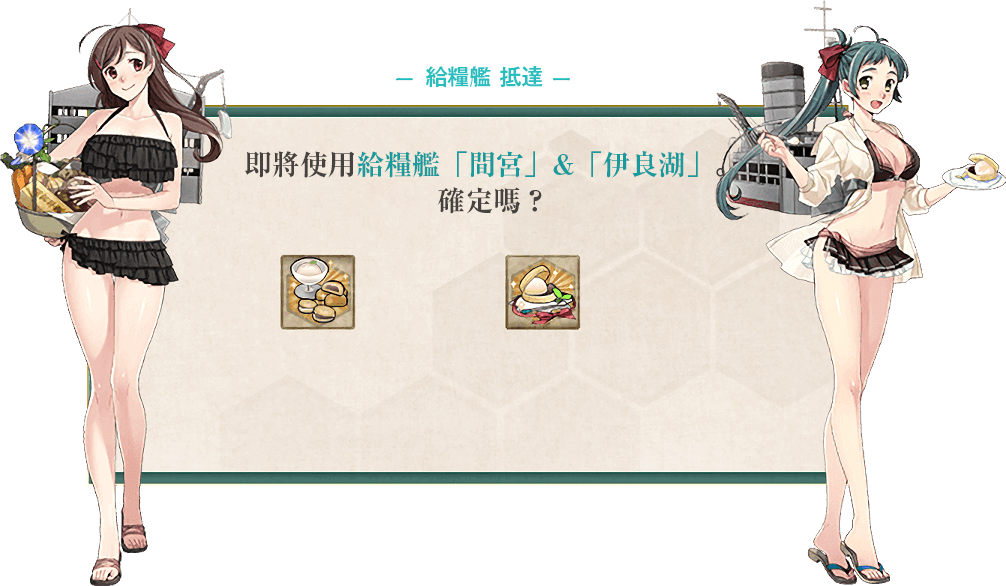
<style>
.page{position:relative;width:1006px;height:586px;background:#ffffff}
.page>*{position:absolute;margin:0}
.t1{font:22px "GothicMB101Pr6N-Medium";color:#2bbcbe}
.t2{font:28px/36px "RyuminPr6N-ExBold";color:#199a9c}
.t3{font:28px/36px "RyuminPr6N-ExBold";color:#46423f}
</style>
<div class="page">
<p class="t1" style="left:426px;top:65px;width:117px;height:23px">給糧艦 抵達</p>
<p class="t2" style="left:245px;top:151px;width:480px;height:63px;text-align:center"><span class="t3">即將使用</span>給糧艦「間宮」&amp;「伊良湖」<span class="t3">。<br>確定嗎？</span></p>
</div>
